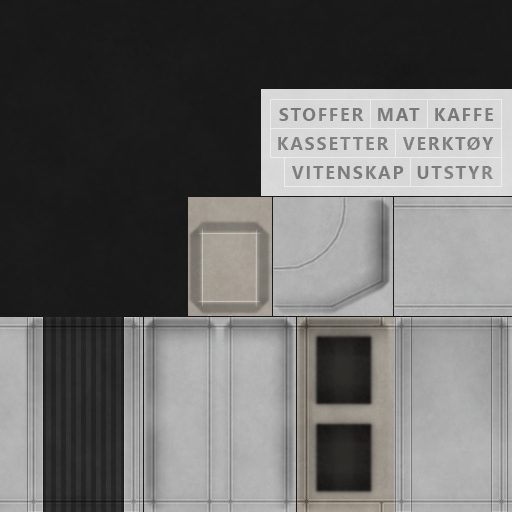
<style>
.page{position:relative;width:512px;height:512px}
.page>*{position:absolute;margin:0}
.t1{font:18px "SegoeUI-Bold";letter-spacing:0.1em;color:#808080}
</style>
<div class="page">
<p class="t1" style="left:279px;top:108px;width:85px;height:13px">STOFFER</p>
<p class="t1" style="left:378px;top:108px;width:42px;height:13px">MAT</p>
<p class="t1" style="left:435px;top:108px;width:58px;height:13px">KAFFE</p>
<p class="t1" style="left:278px;top:137px;width:111px;height:13px">KASSETTER</p>
<p class="t1" style="left:402px;top:137px;width:92px;height:13px">VERKTØY</p>
<p class="t1" style="left:291px;top:166px;width:113px;height:13px">VITENSKAP</p>
<p class="t1" style="left:417px;top:166px;width:76px;height:13px">UTSTYR</p>
</div>
